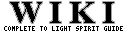
<style>
.page{position:relative;width:128px;height:32px;background:#ffffff}
.page>*{position:absolute;margin:0}
.t1{font:32px "TimesNewRomanPS-BoldMT";letter-spacing:0.25em;color:#000000}
.t2{font:6px "Terminal";color:#000000}
</style>
<div class="page">
<p class="t1" style="left:10px;top:2px;width:104px;height:21px">WIKI</p>
<p class="t1" style="left:10px;top:2px;width:104px;height:21px">WIKI</p>
<p class="t2" style="left:4px;top:26px;width:119px;height:5px">COMPLETE TO LIGHT SPIRIT GUIDE</p>
</div>
